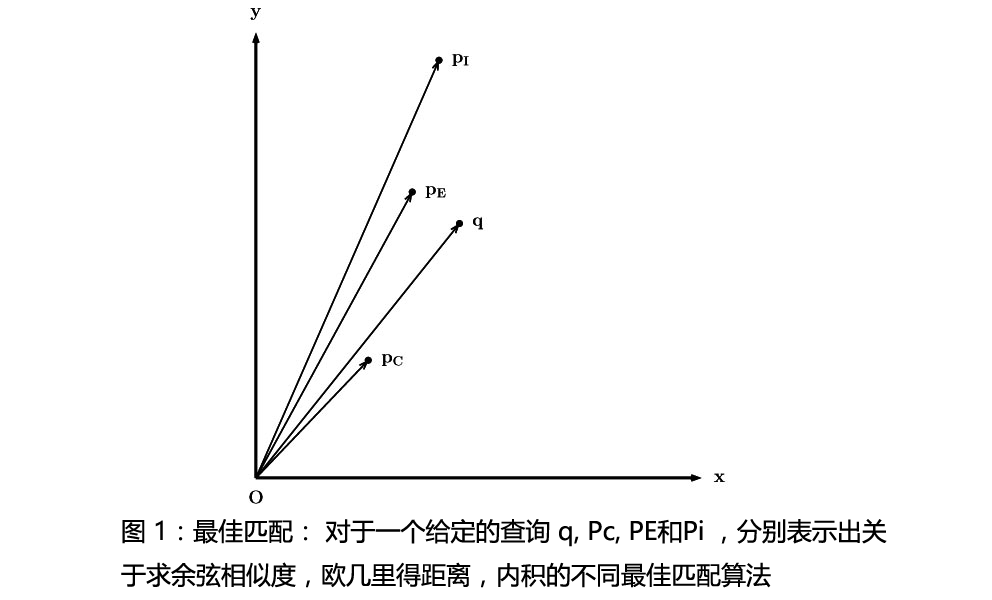
<style>
.page{position:relative;width:992px;height:600px;background:#ffffff}
.page>*{position:absolute;margin:0}
.t1{font:25px "MicrosoftYaHei";color:#000000}
</style>
<div class="page">
<p class="t1" style="left:121px;top:519px;width:766px;height:69px">图 1：最佳匹配： 对于一个给定的查询 q, Pc, PE和Pi ，分别表示出关于求余弦相似度，欧几里得距离，内积的不同最佳匹配算法</p>
</div>
